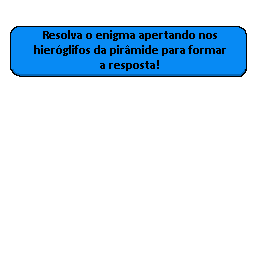
<style>
.page{position:relative;width:256px;height:256px;background:#ffffff}
.page>*{position:absolute;margin:0}
.t1{font:12.5px "Calibri-Bold";color:#000000}
</style>
<div class="page">
<p class="t1" style="left:34px;top:30px;width:192px;height:41px;text-align:center">Resolva o enigma apertando nos<br>hieróglifos da pirâmide para formar<br>a resposta!</p>
</div>
